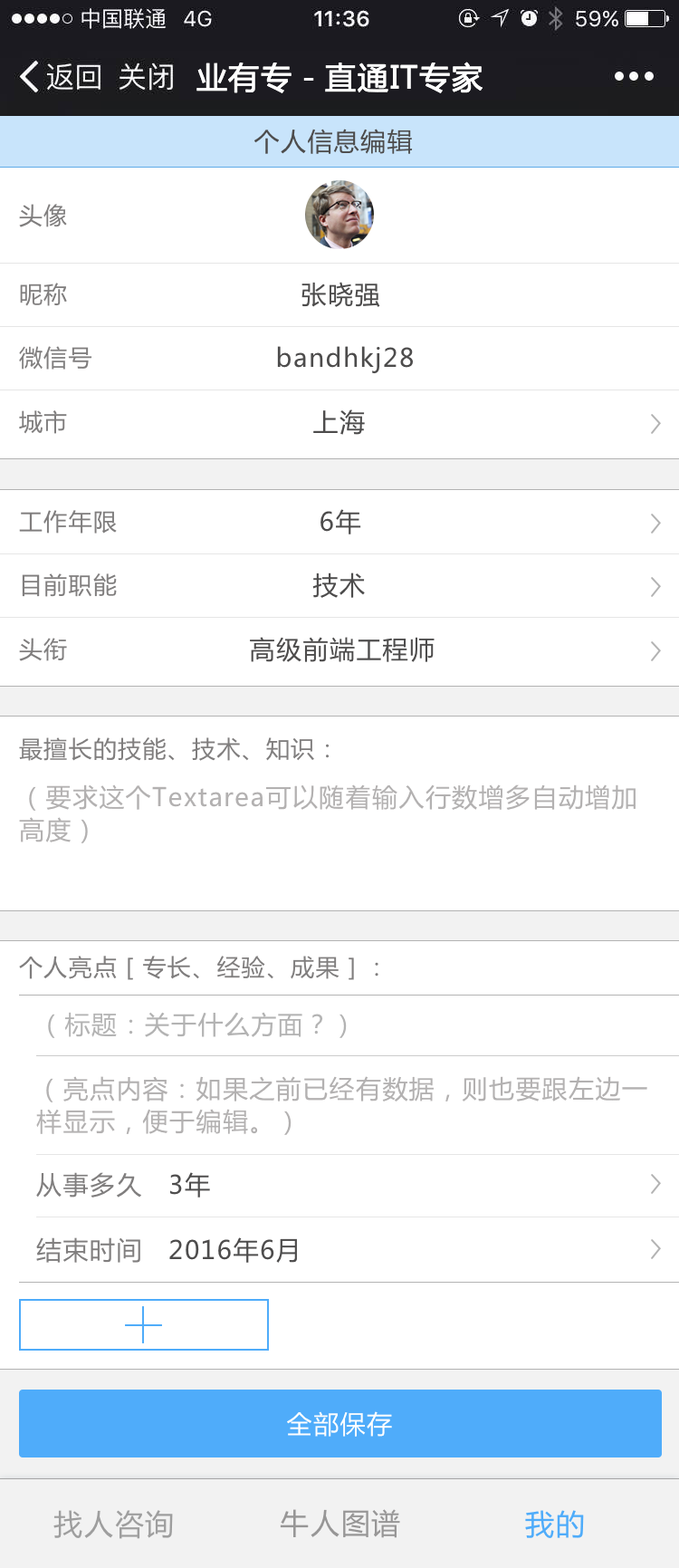
<style>
.page{position:relative;width:679px;height:1568px;background:#ffffff}
.page>*{position:absolute;margin:0}
.t1{font:30.8px "MicrosoftYaHei";letter-spacing:0.05em;color:#ffffff;text-transform:uppercase}
.t2{font:25.4px "MicrosoftYaHei";letter-spacing:0.05em;color:#4d4c4c}
.t3{font:23.6px "MicrosoftYaHei";letter-spacing:0.05em;color:#807e7e}
.t4{font:25.4px/32.6px "MicrosoftYaHei";letter-spacing:0.05em;color:#b3b1b1}
.t5{font:25.4px "MicrosoftYaHei";letter-spacing:0.05em;color:#b3b3b3}
.t6{font:25.4px "MicrosoftYaHei";letter-spacing:0.05em;color:#807e7e}
.t7{font:25.4px "MicrosoftYaHei";letter-spacing:0.05em;color:#fffefe}
.t8{font:29px "MicrosoftYaHei";letter-spacing:0.05em;color:#9e9e9e;text-transform:uppercase}
.t9{font:29px "MicrosoftYaHei";letter-spacing:0.05em;color:#979696;text-transform:uppercase}
.t10{font:29px "MicrosoftYaHei";letter-spacing:0.05em;color:#4facfa;text-transform:uppercase}
</style>
<div class="page">
<p class="t1" style="left:197px;top:62px;width:286px;height:31px">业有专－直通IT专家</p>
<p class="t2" style="left:255px;top:129px;width:158px;height:25px">个人信息编辑</p>
<p class="t3" style="left:19px;top:204px;width:48px;height:23px">头像</p>
<p class="t2" style="left:302px;top:282px;width:78px;height:25px">张晓强</p>
<p class="t3" style="left:20px;top:283px;width:47px;height:23px">昵称</p>
<p class="t3" style="left:19px;top:346px;width:73px;height:24px">微信号</p>
<p class="t2" style="left:277px;top:346px;width:136px;height:28px">bandhkj28</p>
<p class="t3" style="left:19px;top:410px;width:48px;height:24px">城市</p>
<p class="t2" style="left:313px;top:409px;width:52px;height:26px">上海</p>
<p class="t3" style="left:19px;top:510px;width:98px;height:24px">工作年限</p>
<p class="t2" style="left:321px;top:509px;width:40px;height:25px">6年</p>
<p class="t3" style="left:22px;top:573px;width:95px;height:24px">目前职能</p>
<p class="t2" style="left:313px;top:572px;width:52px;height:26px">技术</p>
<p class="t3" style="left:19px;top:638px;width:48px;height:23px">头衔</p>
<p class="t2" style="left:250px;top:637px;width:185px;height:25px">高级前端工程师</p>
<p class="t3" style="left:19px;top:737px;width:311px;height:24px">最擅长的技能、技术、知识：</p>
<p class="t4" style="left:19px;top:784px;width:617px;height:59px">（要求这个Textarea可以随着输入行数增多自动增加高度）</p>
<p class="t3" style="left:19px;top:956px;width:360px;height:24px">个人亮点［专长、经验、成果］：</p>
<p class="t5" style="left:48px;top:1012px;width:299px;height:26px">（标题：关于什么方面？）</p>
<p class="t4" style="left:36px;top:1076px;width:612px;height:59px">（亮点内容：如果之前已经有数据，则也要跟左边一样显示，便于编辑。）</p>
<p class="t6" style="left:36px;top:1172px;width:105px;height:26px">从事多久</p>
<p class="t2" style="left:169px;top:1172px;width:41px;height:26px">3年</p>
<p class="t6" style="left:36px;top:1237px;width:104px;height:26px">结束时间</p>
<p class="t2" style="left:169px;top:1237px;width:128px;height:26px">2016年6月</p>
<p class="t7" style="left:287px;top:1411px;width:105px;height:26px">全部保存</p>
<p class="t8" style="left:53px;top:1510px;width:120px;height:29px">找人咨询</p>
<p class="t9" style="left:280px;top:1509px;width:120px;height:29px">牛人图谱</p>
<p class="t10" style="left:525px;top:1510px;width:59px;height:28px">我的</p>
</div>
